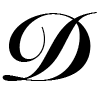
<style>
.page{position:relative;width:100px;height:100px;background:#ffffff}
.page>*{position:absolute;margin:0}
.t1{font:92px "SnellRoundhand-Black";color:#000000}
</style>
<div class="page">
<p class="t1" style="left:2px;top:12px;width:95px;height:69px">D</p>
</div>
